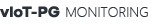
<style>
.page{position:relative;width:160px;height:24px;background:#ffffff}
.page>*{position:absolute;margin:0}
.t1{font:15.5px "GalanoGrotesque-Bold";color:#2a3139}
</style>
<div class="page">
<p class="t1" style="left:0px;top:6px;width:60px;height:12px">vIoT-PG</p>
</div>
